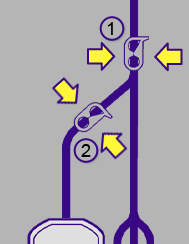
<style>
.page{position:relative;width:189px;height:244px;background:#b5b5b5}
.page>*{position:absolute;margin:0}
.t1{font:18px "ArialMT";letter-spacing:0.02em;color:#000100}
</style>
<div class="page">
<p class="t1" style="left:107px;top:22px;width:6px;height:13px">1</p>
<p class="t1" style="left:81px;top:144px;width:10px;height:13px">2</p>
</div>
